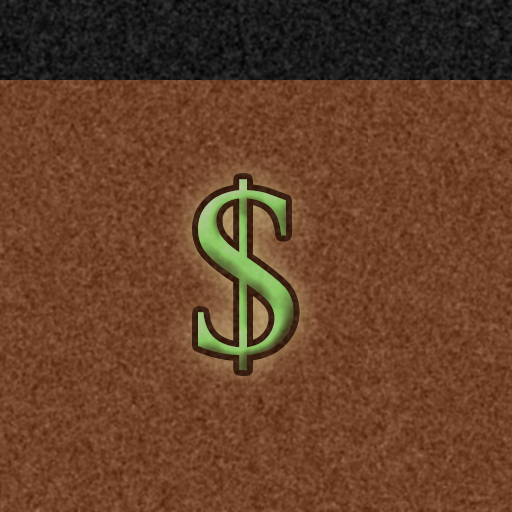
<style>
.page{position:relative;width:512px;height:512px}
.page>*{position:absolute;margin:0}
.t1{font:240px "TimesNewRomanPSMT"}
</style>
<div class="page">
<p class="t1" style="left:198px;top:179px;width:96px;height:191px">$</p>
</div>
